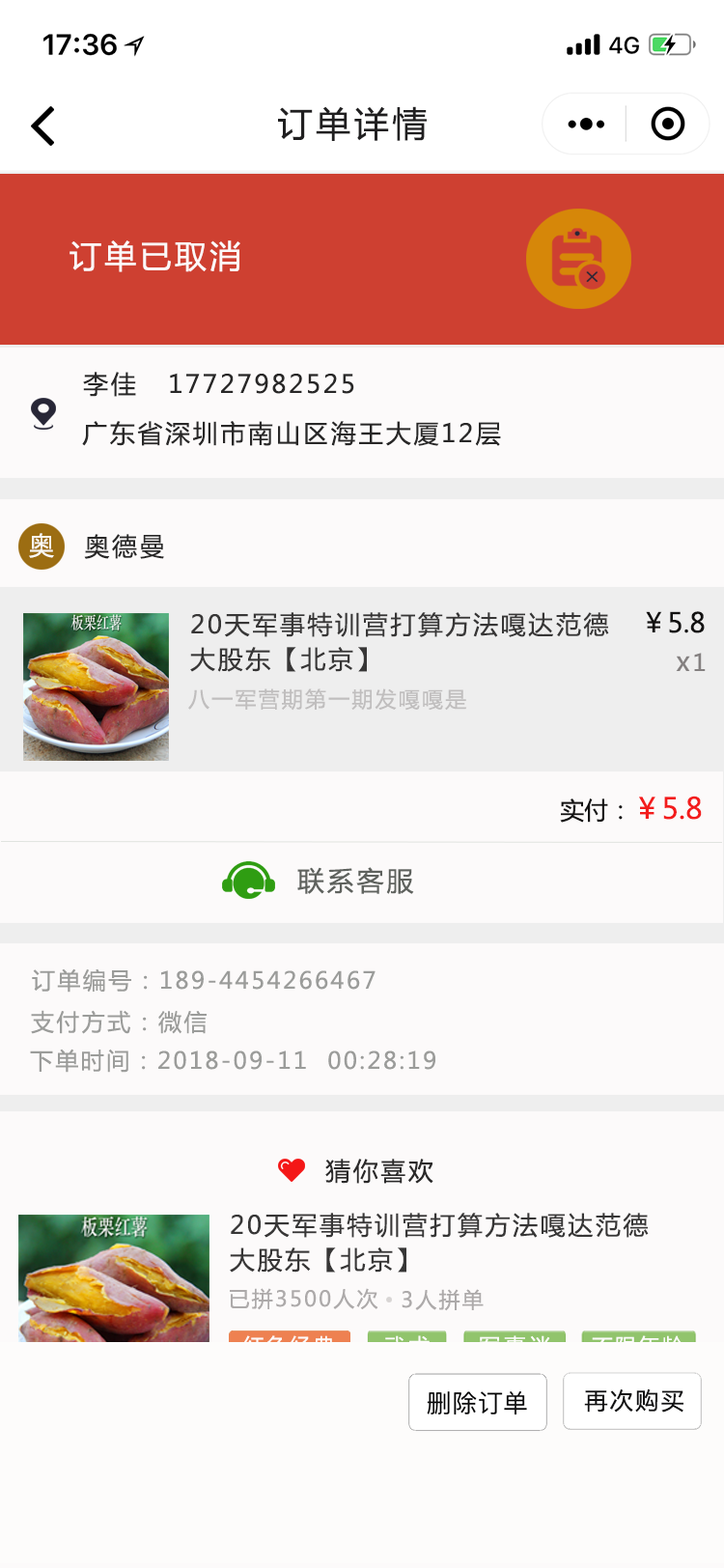
<style>
.page{position:relative;width:724px;height:1568px;background:#fcfafa}
.page>*{position:absolute;margin:0}
.t1{font:34.8px "MicrosoftYaHei";letter-spacing:0.1em;color:#201f20}
.t2{font:31.9px "MicrosoftYaHei";letter-spacing:0.1em;color:#fcf9f9}
.t3{font:25.1px "MicrosoftYaHei";letter-spacing:0.1em;color:#282727}
.t4{font:25.1px "MicrosoftYaHei";letter-spacing:0.1em;color:#f9f7f2}
.t5{font:25.1px/34.8px "MicrosoftYaHei";letter-spacing:0.1em;color:#373636}
.t6{font:27px "MicrosoftYaHei";color:#121111}
.t7{font:27px "MicrosoftYaHei";letter-spacing:0.1em;color:#848080}
.t8{font:23.2px "MicrosoftYaHei";letter-spacing:0.1em;color:#848080}
.t9{font:21.2px "MicrosoftYaHei";letter-spacing:0.1em;color:#c0bebe}
.t10{font:29px "MicrosoftYaHei";color:#f31c1c}
.t11{font:24.1px "MicrosoftYaHei";color:#121111}
.t12{font:27px "MicrosoftYaHei";letter-spacing:0.1em;color:#5f625e}
.t13{font:23.2px "MicrosoftYaHei";letter-spacing:0.1em;color:#9b9c9a}
.t14{font:25.1px "MicrosoftYaHei";letter-spacing:0.1em;color:#2a2929}
.t15{font:21.2px "MicrosoftYaHei";letter-spacing:0.1em;color:#adaaaa}
.t16{font:21.2px "MicrosoftYaHei";letter-spacing:0.1em;color:#fdfcfb}
.t17{font:21.2px "MicrosoftYaHei";letter-spacing:0.2em;color:#fdfcfb}
.t18{font:23.2px "MicrosoftYaHei";letter-spacing:0.1em;color:#111112}
</style>
<div class="page">
<p class="t1" style="left:278px;top:106px;width:149px;height:35px">订单详情</p>
<p class="t2" style="left:70px;top:240px;width:170px;height:32px">订单已取消</p>
<p class="t3" style="left:83px;top:372px;width:271px;height:25px">李佳   17727982525</p>
<p class="t3" style="left:82px;top:421px;width:419px;height:25px">广东省深圳市南山区海王大厦12层</p>
<p class="t4" style="left:29px;top:533px;width:25px;height:25px">奥</p>
<p class="t3" style="left:84px;top:534px;width:80px;height:25px">奥德曼</p>
<p class="t5" style="left:190px;top:612px;width:419px;height:60px">20天军事特训营打算方法嘎达范德<br>大股东【北京】</p>
<p class="t6" style="left:646px;top:611px;width:59px;height:22px">￥5.8</p>
<p class="t7" style="left:676px;top:653px;width:30px;height:18px">x<span class="t8">1</span></p>
<p class="t9" style="left:188px;top:688px;width:279px;height:23px">八一军营期第一期发嘎嘎是</p>
<p class="t10" style="left:560px;top:796px;width:142px;height:27px"><span class="t11">实付：</span>￥5.8</p>
<p class="t12" style="left:297px;top:867px;width:117px;height:27px">联系客服</p>
<p class="t13" style="left:32px;top:968px;width:344px;height:25px">订单编号：189-4454266467</p>
<p class="t13" style="left:31px;top:1010px;width:176px;height:24px">支付方式：微信</p>
<p class="t13" style="left:30px;top:1049px;width:405px;height:24px">下单时间：2018-09-11  00:28:19</p>
<p class="t14" style="left:325px;top:1159px;width:109px;height:25px">猜你喜欢</p>
<p class="t5" style="left:230px;top:1213px;width:419px;height:60px">20天军事特训营打算方法嘎达范德<br>大股东【北京】</p>
<p class="t15" style="left:230px;top:1288px;width:148px;height:22px">已拼3500人次</p>
<p class="t15" style="left:402px;top:1289px;width:82px;height:22px">3人拼单</p>
<p class="t16" style="left:243px;top:1335px;width:91px;height:22px">红色经典</p>
<p class="t17" style="left:479px;top:1335px;width:72px;height:22px">军事迷</p>
<p class="t18" style="left:584px;top:1389px;width:100px;height:24px">再次购买</p>
</div>
